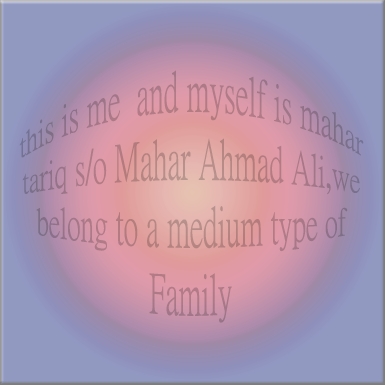
<style>
.page{position:relative;width:385px;height:385px}
.page>*{position:absolute;margin:0}
.t1{font:28.9px "PMingLiU-ExtB";color:#b17b88}
</style>
<div class="page">
<p class="t1" style="left:19px;top:70px;width:345px;height:253px;text-align:center">this is me  and myself is mahar tariq s/o Mahar Ahmad Ali,we belong to a medium type of Family</p>
</div>
